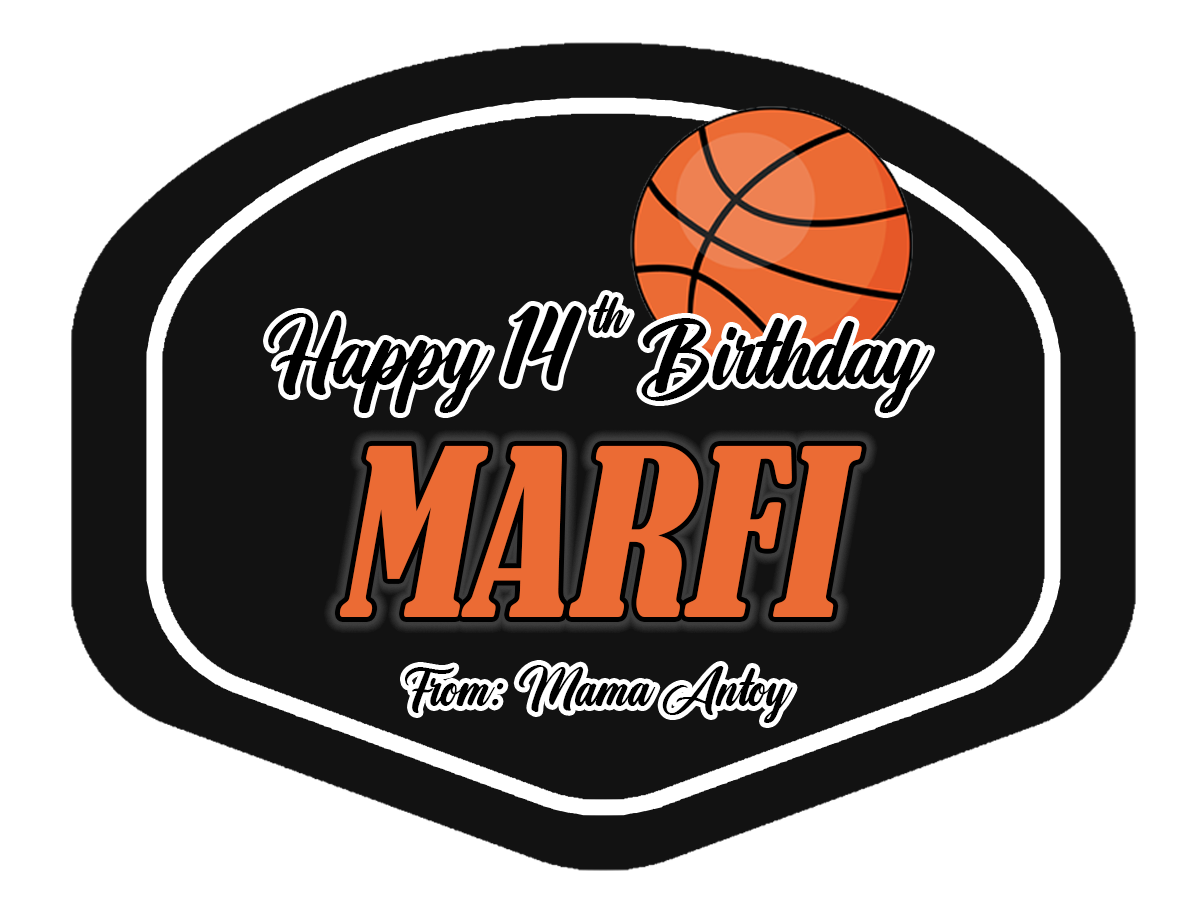
<style>
.page{position:relative;width:1200px;height:900px;background:#121212}
.page>*{position:absolute;margin:0}
.t1{font:51.3px "Athletic-Outfit";color:#000000;font-style:italic}
.t2{font:90.1px "Athletic-Outfit";color:#000000;font-style:italic}
.t3{font:112.3px "Athletic-Outfit";color:#000000;font-style:italic}
.t4{font:216.8px "BernardMT-Condensed";color:#eb6b34;font-style:italic}
.t5{font:51.5px "Athletic-Outfit";color:#000000;font-style:italic}
</style>
<div class="page">
<p class="t1" style="left:593px;top:295px;width:37px;height:38px">th</p>
<p class="t2" style="left:268px;top:306px;width:662px;height:107px">Happy <span class="t3">14</span>   Birthday</p>
<p class="t4" style="left:339px;top:445px;width:523px;height:172px">MARFI</p>
<p class="t5" style="left:405px;top:665px;width:388px;height:58px">From: Mama Antoy</p>
</div>
